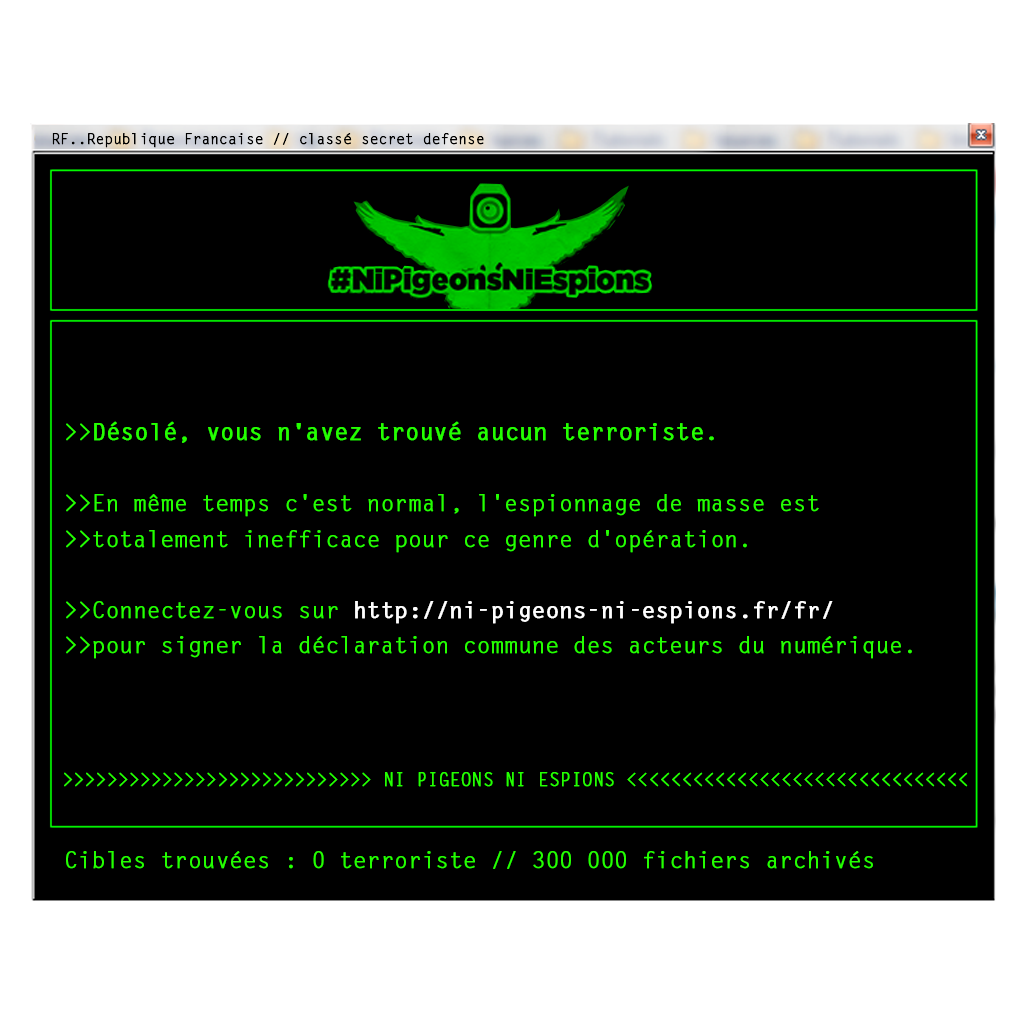
<style>
.page{position:relative;width:1024px;height:1024px;background:#000000}
.page>*{position:absolute;margin:0}
.t1{font:25px "LetterGothicStd";letter-spacing:-0.02em;color:#000000;font-weight:bold}
.t2{font:38.6px/35.6px "LetterGothicStd";letter-spacing:-0.02em;color:#24ff00;font-weight:bold}
.t3{font:40px/35.6px "LetterGothicStd-Bold";letter-spacing:-0.02em;color:#24ff00;font-weight:bold}
.t4{font:38.6px/35.6px "LetterGothicStd-Bold";letter-spacing:-0.02em;color:#ffffff;font-weight:bold}
.t5{font:31px "LetterGothicStd";letter-spacing:-0.02em;color:#24ff00;font-weight:bold}
.t6{font:38.6px "LetterGothicStd";letter-spacing:-0.02em;color:#24ff00;font-weight:bold}
</style>
<div class="page">
<p class="t1" style="left:52px;top:133px;width:432px;height:15px">RF..Republique Francaise // classé secret defense</p>
<p class="t2" style="left:66px;top:421px;width:846px;height:238px">&gt;&gt;<span class="t3">Désolé, vous n'avez trouvé aucun terroriste.<br><br></span>&gt;&gt;En même temps c'est normal, l'espionnage de masse est <br>&gt;&gt;totalement inefficace pour ce genre d'opération.<br><br>&gt;&gt;Connectez-vous sur <span class="t4">http://ni-pigeons-ni-espions.fr/fr/</span> <br>&gt;&gt;pour signer la déclaration commune des acteurs du numérique.</p>
<p class="t5" style="left:64px;top:772px;width:904px;height:15px">&gt;&gt;&gt;&gt;&gt;&gt;&gt;&gt;&gt;&gt;&gt;&gt;&gt;&gt;&gt;&gt;&gt;&gt;&gt;&gt;&gt;&gt;&gt;&gt;&gt;&gt;&gt;&gt; NI PIGEONS NI ESPIONS &lt;&lt;&lt;&lt;&lt;&lt;&lt;&lt;&lt;&lt;&lt;&lt;&lt;&lt;&lt;&lt;&lt;&lt;&lt;&lt;&lt;&lt;&lt;&lt;&lt;&lt;&lt;&lt;&lt;&lt;&lt;</p>
<p class="t6" style="left:66px;top:851px;width:807px;height:18px">Cibles trouvées : 0 terroriste // 300 000 fichiers archivés</p>
</div>
